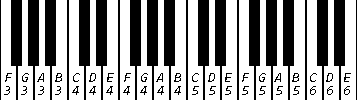
<style>
.page{position:relative;width:357px;height:100px;background:#ffffff}
.page>*{position:absolute;margin:0}
.t1{font:14px "Consolas-Italic";letter-spacing:0.64em;color:#000000}
</style>
<div class="page">
<p class="t1" style="left:5px;top:73px;width:346px;height:9px">FGABCDEFGABCDEFGABCDE</p>
<p class="t1" style="left:4px;top:86px;width:346px;height:9px">333344444445555555666</p>
</div>
